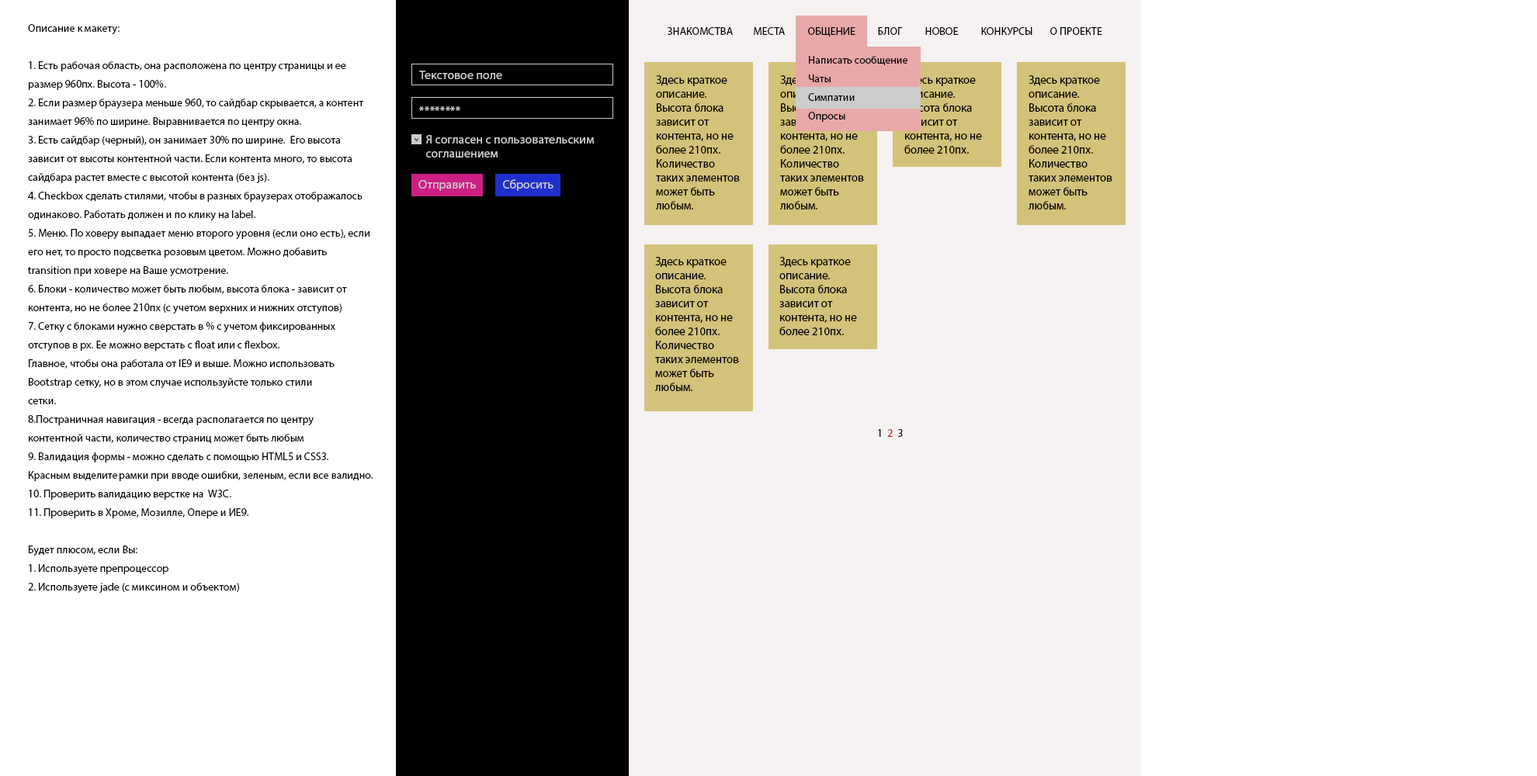
<style>
.page{position:relative;width:1537px;height:776px;background:#ffffff}
.page>*{position:absolute;margin:0}
.t1{font:10.9px/18.6px "MyriadPro-Regular";color:#040404}
.t2{font:10.9px "MyriadPro-Regular";color:#040404;text-transform:uppercase}
.t3{font:12.4px "MyriadPro-Regular";color:#cccccc}
.t4{font:11.6px/14px "MyriadPro-Regular";color:#000000}
.t5{font:12.4px/14px "MyriadPro-Regular";color:#cccccc}
.t6{font:10.9px "MyriadPro-Regular";color:#040404}
.t7{font:10.9px "MyriadPro-Regular";color:#d62020}
</style>
<div class="page">
<p class="t1" style="left:28px;top:24px;width:344px;height:569px">Описание к макету:<br><br>1. Есть рабочая область, она расположена по центру страницы и ее <br>размер 960пх. Высота - 100%. <br>2. Если размер браузера меньше 960, то сайдбар скрывается, а контент <br>занимает 96% по ширине. Выравнивается по центру окна. <br>3. Есть сайдбар (черный), он занимает 30% по ширине.  Его высота <br>зависит от высоты контентной части. Если контента много, то высота <br>сайдбара растет вместе с высотой контента (без js).<br>4. Checkbox сделать стилями, чтобы в разных браузерах отображалось<br>одинаково. Работать должен и по клику на label.<br>5. Меню. По ховеру выпадает меню второго уровня (если оно есть), если <br>его нет, то просто подсветка розовым цветом. Можно добавить <br>transition при ховере на Ваше усмотрение.<br>6. Блоки - количество может быть любым, высота блока - зависит от <br>контента, но не более 210пх (с учетом верхних и нижних отступов)<br>7. Сетку с блоками нужно сверстать в % с учетом фиксированных<br>отступов в px. Ее можно верстать с float или с flexbox.<br>Главное, чтобы она работала от IE9 и выше. Можно использовать <br>Bootstrap сетку, но в этом случае используйсте только стили<br>сетки.  <br>8.Постраничная навигация - всегда располагается по центру <br>контентной части, количество страниц может быть любым<br>9. Валидация формы - можно сделать с помощью HTML5 и CSS3. <br>Красным выделите рамки при вводе ошибки, зеленым, если все валидно.<br>10. Проверить валидацию верстке на  W3C.<br>11. Проверить в Хроме, Мозилле, Опере и ИЕ9. <br><br>Будет плюсом, если Вы:<br>1. Используете препроцессор<br>2. Используете jade (с миксином и объектом)</p>
<p class="t2" style="left:667px;top:27px;width:66px;height:8px">Знакомства</p>
<p class="t2" style="left:754px;top:27px;width:31px;height:8px">Места</p>
<p class="t2" style="left:808px;top:27px;width:47px;height:10px">Общение</p>
<p class="t2" style="left:878px;top:27px;width:25px;height:8px">Блог</p>
<p class="t2" style="left:925px;top:27px;width:33px;height:8px">Новое</p>
<p class="t2" style="left:981px;top:27px;width:51px;height:8px">Конкурсы</p>
<p class="t2" style="left:1050px;top:27px;width:52px;height:8px">О проекте</p>
<p class="t1" style="left:808px;top:56px;width:99px;height:66px">Написать сообщение<br>Чаты<br>Симпатии<br>Опросы</p>
<p class="t3" style="left:419px;top:71px;width:83px;height:8px">Текстовое поле</p>
<p class="t4" style="left:656px;top:75px;width:84px;height:135px">Здесь краткое <br>описание. <br>Высота блока <br>зависит от<br>контента, но не<br>более 210пх. <br>Количество <br>таких элементов <br>может быть <br>любым.</p>
<p class="t4" style="left:780px;top:75px;width:84px;height:135px">Здесь краткое <br>описание. <br>Высота блока <br>зависит от<br>контента, но не<br>более 210пх. <br>Количество <br>таких элементов <br>может быть <br>любым.</p>
<p class="t4" style="left:904px;top:75px;width:78px;height:79px">Здесь краткое <br>описание. <br>Высота блока <br>зависит от<br>контента, но не<br>более 210пх.</p>
<p class="t4" style="left:1028px;top:75px;width:84px;height:135px">Здесь краткое <br>описание. <br>Высота блока <br>зависит от<br>контента, но не<br>более 210пх. <br>Количество <br>таких элементов <br>может быть <br>любым.</p>
<p class="t3" style="left:419px;top:106px;width:41px;height:5px">********</p>
<p class="t5" style="left:425px;top:135px;width:169px;height:23px">Я согласен с пользовательским <br>соглашением</p>
<p class="t3" style="left:418px;top:180px;width:58px;height:11px">Отправить</p>
<p class="t3" style="left:503px;top:179px;width:50px;height:12px">Сбросить</p>
<p class="t4" style="left:655px;top:257px;width:84px;height:134px">Здесь краткое <br>описание. <br>Высота блока <br>зависит от<br>контента, но не<br>более 210пх. <br>Количество <br>таких элементов <br>может быть <br>любым.</p>
<p class="t4" style="left:779px;top:257px;width:78px;height:78px">Здесь краткое <br>описание. <br>Высота блока <br>зависит от<br>контента, но не<br>более 210пх.</p>
<p class="t6" style="left:878px;top:429px;width:25px;height:8px">1  <span class="t7">2</span>  3</p>
</div>
